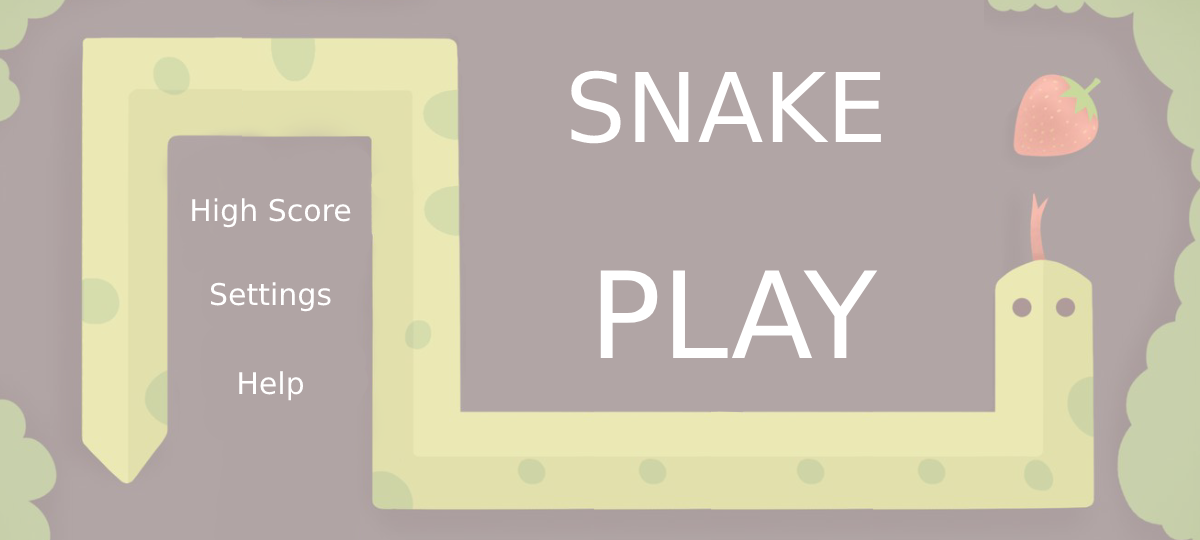
<style>
.page{position:relative;width:1200px;height:540px;background:#b1a5a5}
.page>*{position:absolute;margin:0}
.t1{font:96px "DejaVuSans";color:#ffffff}
.t2{font:30px "DejaVuSans";color:#ffffff}
.t3{font:120px "DejaVuSans";color:#ffffff}
</style>
<div class="page">
<p class="t1" style="left:571px;top:70px;width:310px;height:74px">SNAKE</p>
<p class="t2" style="left:192px;top:198px;width:159px;height:30px">High Score</p>
<p class="t3" style="left:600px;top:270px;width:278px;height:88px">PLAY</p>
<p class="t2" style="left:210px;top:282px;width:121px;height:30px">Settings</p>
<p class="t2" style="left:239px;top:371px;width:65px;height:30px">Help</p>
</div>
